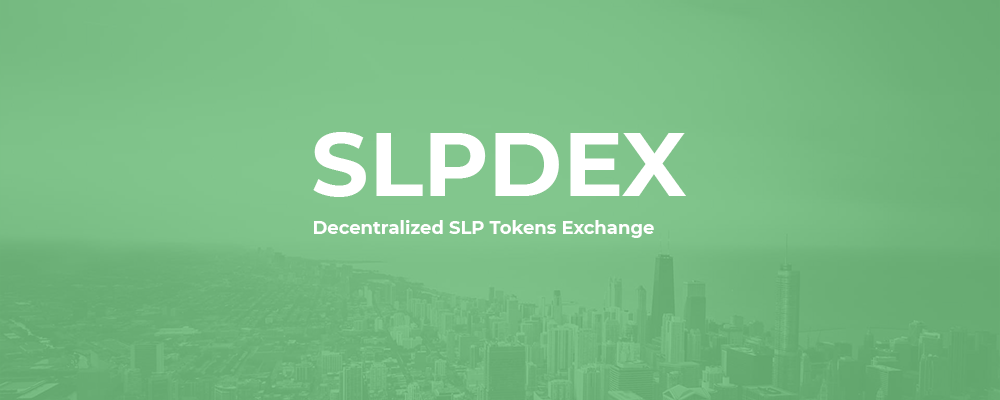
<style>
.page{position:relative;width:1000px;height:400px}
.page>*{position:absolute;margin:0}
.t1{font:90px "Montserrat-Bold";color:#ffffff}
.t2{font:18px "Montserrat-Bold";color:#ffffff}
</style>
<div class="page">
<p class="t1" style="left:313px;top:132px;width:373px;height:65px">SLPDEX</p>
<p class="t2" style="left:314px;top:220px;width:340px;height:18px">Decentralized SLP Tokens Exchange</p>
</div>
